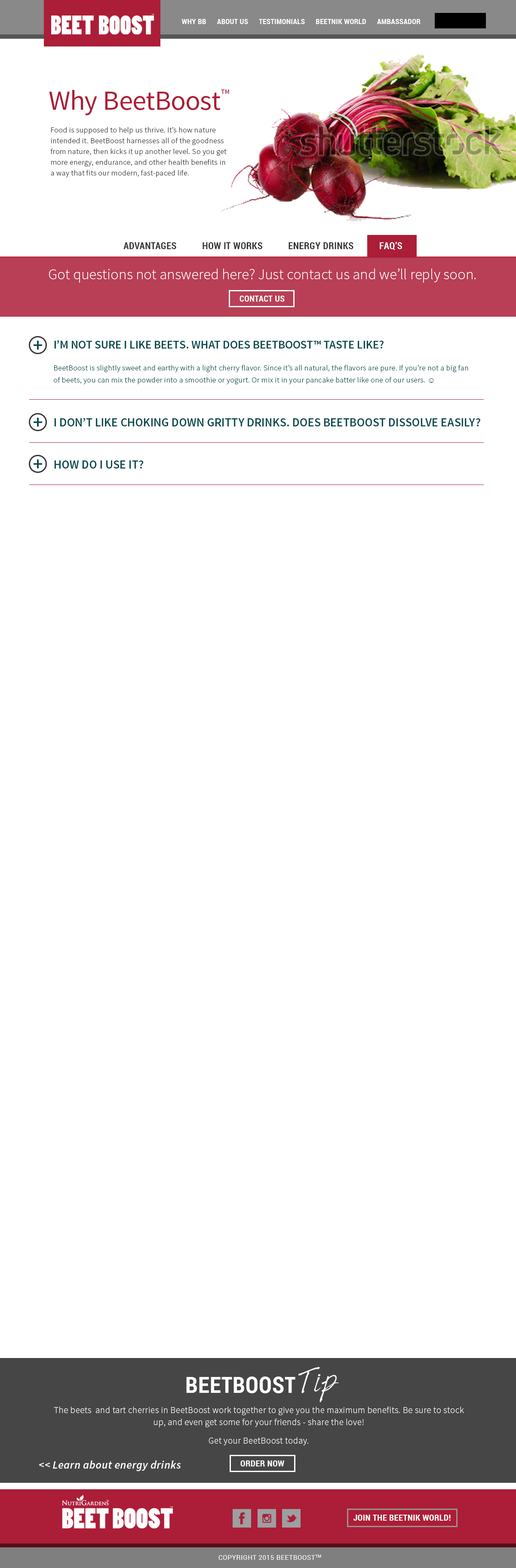
<style>
.page{position:relative;width:516px;height:1568px;background:#ffffff}
.page>*{position:absolute;margin:0}
.t1{font:7.3px "RobotoCondensed-Bold";letter-spacing:0.025em;color:#ffffff;text-transform:uppercase}
.t2{font:27.7px "SourceSansPro-Regular";color:#ac1d37}
.t3{font:13.8px "SourceSansPro-Regular";color:#ac1d37;font-variant:small-caps}
.t4{font:7.7px/10.8px "SourceSansPro-Light";letter-spacing:0.025em;color:#333333}
.t5{font:9.5px "RobotoCondensed-Bold";letter-spacing:0.025em;color:#333333;text-transform:uppercase}
.t6{font:9.5px "RobotoCondensed-Bold";letter-spacing:0.025em;color:#ffffff;text-transform:uppercase}
.t7{font:15.1px "SourceSansPro-Light";color:#ffffff}
.t8{font:8.6px "RobotoCondensed-Bold";letter-spacing:0.025em;color:#ffffff;text-transform:uppercase}
.t9{font:19.4px "SourceSansPro-Semibold";color:#0e4b4f;text-transform:uppercase}
.t10{font:11.6px "SourceSansPro-Semibold";color:#0e4b4f;text-transform:uppercase}
.t11{font:7.7px/12px "SourceSansPro-Light";letter-spacing:0.025em;color:#0e4b4f}
.t12{font:7.7px/12px "TimesNewRomanPSMT";letter-spacing:0.025em;color:#0e4b4f}
.t13{font:12px "SourceSansPro-Semibold";color:#0e4b4f;text-transform:uppercase}
.t14{font:26.8px "HarabaraHand";color:#ffffff}
.t15{font:22.2px "RobotoCondensed-Bold";letter-spacing:0.025em;color:#ffffff;text-transform:uppercase}
.t16{font:9px/12px "SourceSansPro-Light";letter-spacing:0.025em;color:#ffffff}
.t17{font:11.1px "SourceSansPro-SemiboldIt";letter-spacing:0.025em;color:#ffffff}
.t18{font:6.5px "Roboto-Regular";letter-spacing:0.05em;color:#ffffff;text-transform:uppercase}
</style>
<div class="page">
<p class="t1" style="left:182px;top:19px;width:239px;height:5px">Why bb      About us      Testimonials      Beetnik world      Ambassador</p>
<p class="t2" style="left:49px;top:90px;width:180px;height:25px">Why BeetBoost<span class="t3">tm</span></p>
<p class="t4" style="left:50px;top:127px;width:177px;height:50px">Food is supposed to help us thrive. It’s how nature intended it. BeetBoost harnesses all of the goodness from nature, then kicks it up another level. So you get more energy, endurance, and other health benefits in a way that fits our modern, fast-paced life.</p>
<p class="t5" style="left:123px;top:242px;width:279px;height:8px">Advantages           How It Works           Energy Drinks           <span class="t6">FAQ’s</span></p>
<p class="t7" style="left:49px;top:269px;width:427px;height:14px">Got questions not answered here? Just contact us and we’ll reply soon.</p>
<p class="t8" style="left:240px;top:296px;width:45px;height:6px">contact us</p>
<p class="t9" style="left:34px;top:340px;width:8px;height:10px">+</p>
<p class="t10" style="left:54px;top:340px;width:330px;height:9px">I’m not sure I like beets. What does BeetBoost™ taste like?</p>
<p class="t11" style="left:54px;top:365px;width:415px;height:19px">BeetBoost is slightly sweet and earthy with a light cherry flavor. Since it’s all natural, the flavors are pure. If you’re not a big fan of beets, you can mix the powder into a smoothie or yogurt. Or mix it in your pancake batter like one of our users. <span class="t12">☺</span></p>
<p class="t9" style="left:34px;top:417px;width:8px;height:10px">+</p>
<p class="t13" style="left:54px;top:418px;width:427px;height:8px">I don’t like choking down gritty drinks. Does BeetBoost dissolve easily?</p>
<p class="t9" style="left:34px;top:459px;width:8px;height:10px">+</p>
<p class="t13" style="left:54px;top:460px;width:90px;height:9px">How do I use it?</p>
<p class="t14" style="left:299px;top:1367px;width:41px;height:36px;rotate:-7deg">Tip</p>
<p class="t15" style="left:186px;top:1377px;width:110px;height:16px">Beetboost</p>
<p class="t16" style="left:54px;top:1407px;width:410px;height:38px;text-align:center">The beets  and tart cherries in BeetBoost work together to give you the maximum benefits. Be sure to stock up, and even get some for your friends - share the love!<br>Get your BeetBoost today.</p>
<p class="t17" style="left:39px;top:1460px;width:142px;height:11px">&lt;&lt; Learn about energy drinks</p>
<p class="t8" style="left:241px;top:1460px;width:43px;height:6px">Order now</p>
<p class="t8" style="left:354px;top:1515px;width:97px;height:6px">join the beetnik world!</p>
<p class="t18" style="left:219px;top:1555px;width:102px;height:5px">Copyright 2015 beetboosttm</p>
</div>
